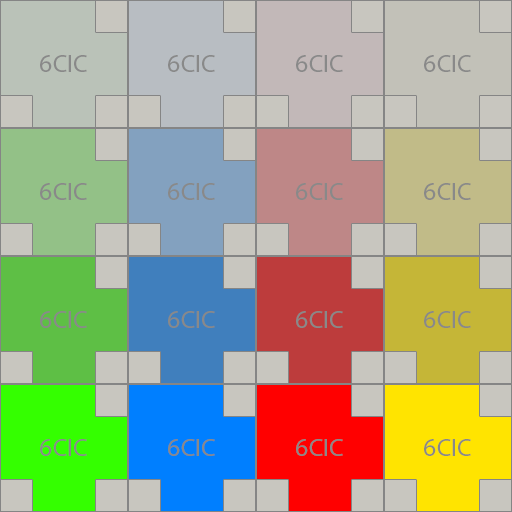
<style>
.page{position:relative;width:512px;height:512px}
.page>*{position:absolute;margin:0}
.t1{font:25px "MyriadPro-Regular";color:#898989}
</style>
<div class="page">
<p class="t1" style="left:40px;top:55px;width:47px;height:17px">6CIC</p>
<p class="t1" style="left:168px;top:55px;width:47px;height:17px">6CIC</p>
<p class="t1" style="left:296px;top:55px;width:47px;height:17px">6CIC</p>
<p class="t1" style="left:424px;top:55px;width:47px;height:17px">6CIC</p>
<p class="t1" style="left:40px;top:183px;width:47px;height:17px">6CIC</p>
<p class="t1" style="left:168px;top:183px;width:47px;height:17px">6CIC</p>
<p class="t1" style="left:296px;top:183px;width:47px;height:17px">6CIC</p>
<p class="t1" style="left:424px;top:183px;width:47px;height:17px">6CIC</p>
<p class="t1" style="left:40px;top:311px;width:47px;height:17px">6CIC</p>
<p class="t1" style="left:168px;top:311px;width:47px;height:17px">6CIC</p>
<p class="t1" style="left:296px;top:311px;width:47px;height:17px">6CIC</p>
<p class="t1" style="left:424px;top:311px;width:47px;height:17px">6CIC</p>
<p class="t1" style="left:40px;top:439px;width:47px;height:17px">6CIC</p>
<p class="t1" style="left:168px;top:439px;width:47px;height:17px">6CIC</p>
<p class="t1" style="left:296px;top:439px;width:47px;height:17px">6CIC</p>
<p class="t1" style="left:424px;top:439px;width:47px;height:17px">6CIC</p>
</div>
